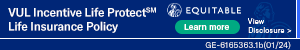
<style>
.page{position:relative;width:300px;height:50px;background:#002677}
.page>*{position:absolute;margin:0}
.t1{font:11.9px/13.9px "GTAmerica-Md";letter-spacing:-0.02em;color:#ffffff}
.t2{font:8.3px "GTAmerica-Md";letter-spacing:0.02em;color:#ffffff}
.t3{font:7.3px "GTAmerica-Th";letter-spacing:0.025em;color:#ffffff}
.t4{font:8.3px "GTAmerica-Rg";letter-spacing:0.025em;color:#ffffff}
</style>
<div class="page">
<p class="t1" style="left:8px;top:7px;width:148px;height:26px">VUL Incentive Life ProtectSM<br>Life Insurance Policy</p>
<p class="t2" style="left:184px;top:24px;width:45px;height:6px">Learn more</p>
<p class="t3" style="left:248px;top:18px;width:44px;height:15px">View<br>Disclosure &gt;</p>
<p class="t4" style="left:205px;top:41px;width:86px;height:9px">GE-6165363.1b(01/24)</p>
</div>
